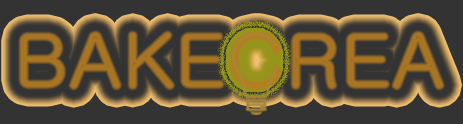
<style>
.page{position:relative;width:463px;height:124px;background:#333333}
.page>*{position:absolute;margin:0}
.t1{font:72px "Gulim";color:#a87522;font-weight:bold;scale:1.1 1}
</style>
<div class="page">
<p class="t1" style="left:20px;top:32px;width:423px;height:57px">BAKECREA</p>
</div>
